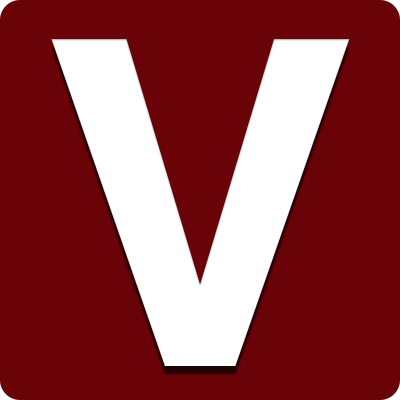
<style>
.page{position:relative;width:400px;height:400px;background:#690308}
.page>*{position:absolute;margin:0}
.t1{font:460px "Roboto-Bold";color:#ffffff}
</style>
<div class="page">
<p class="t1" style="left:51px;top:39px;width:299px;height:327px">V</p>
</div>
